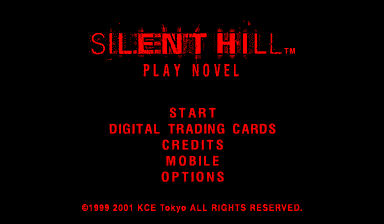
<style>
.page{position:relative;width:384px;height:224px;background:#000000}
.page>*{position:absolute;margin:0}
.t1{font:14.9px/8px "New";letter-spacing:0.18em;color:#ff0000;scale:0.74 1}
.t2{font:14.9px/8px "New";letter-spacing:0.08em;color:#ff0000;scale:0.74 1}
</style>
<div class="page">
<p class="t1" style="left:109px;top:107px;width:167px;height:75px;text-align:center">START<br><br><span class="t2">DIGITAL TRADING CARDS<br></span><br>CREDITS<br><br>MOBILE<br><br>OPTIONS</p>
</div>
